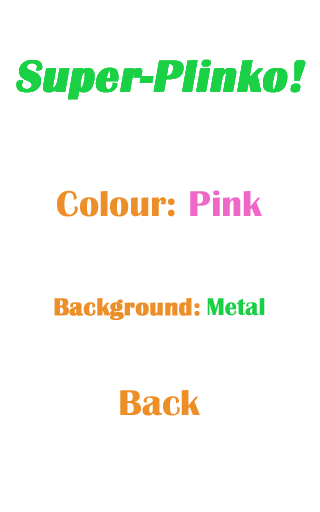
<style>
.page{position:relative;width:320px;height:512px;background:#ffffff}
.page>*{position:absolute;margin:0}
.t1{font:45.7px/124.5px "BritannicBold";color:#1ad044;font-weight:bold;font-style:italic}
.t2{font:37.4px/99.6px "BritannicBold";color:#ed8f29}
.t3{font:24.9px/99.6px "BritannicBold";color:#ed8f29;font-weight:bold}
.t4{font:24.9px/99.6px "BritannicBold";color:#19cf43}
.t5{font:37.4px/124.5px "BritannicBold";color:#ed8f29}
.t6{font:37.4px/124.5px "BritannicBold";color:#ef67c7}
</style>
<div class="page">
<p class="t1" style="left:16px;top:59px;width:290px;height:357px;text-align:center">Super-Plinko!<br><br><br><span class="t2">Back</span></p>
<p class="t1" style="left:16px;top:59px;width:290px;height:261px;text-align:center">Super-Plinko!<br><br><span class="t3">Background: </span><span class="t4">Metal</span></p>
<p class="t1" style="left:16px;top:59px;width:290px;height:158px;text-align:center">Super-Plinko!<br><span class="t5">Colour: </span><span class="t6">Pink</span></p>
</div>
